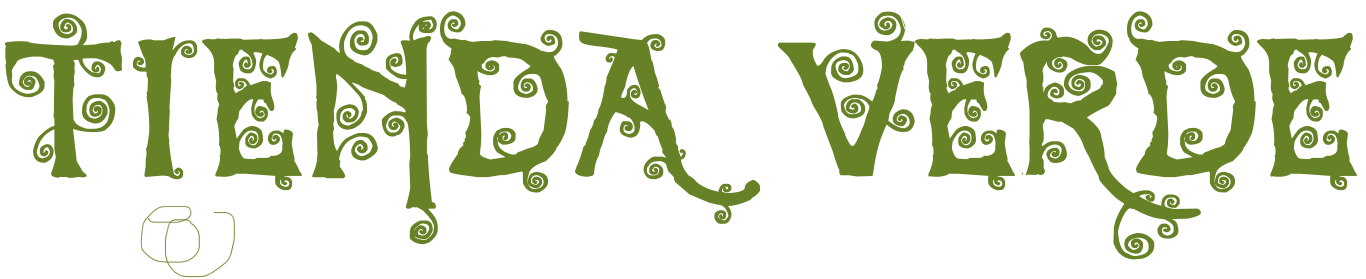
<style>
.page{position:relative;width:1366px;height:279px;background:#ffffff}
.page>*{position:absolute;margin:0}
.t1{font:277px "DearestDorothy";letter-spacing:0.022em;color:#678126}
</style>
<div class="page">
<p class="t1" style="left:5px;top:11px;width:1352px;height:249px">TIENDA VERDE</p>
</div>
